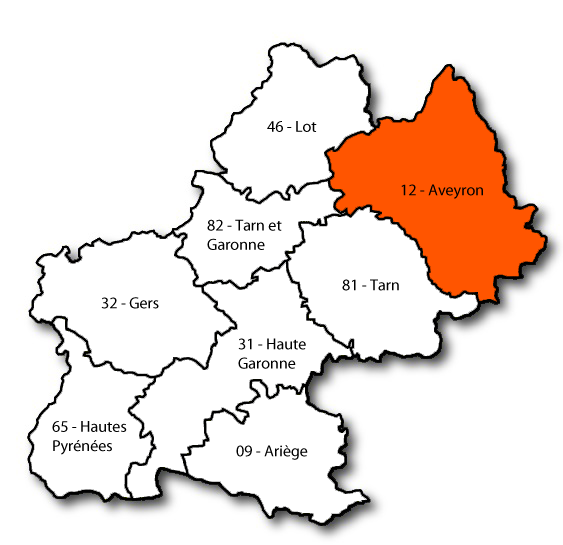
<style>
.page{position:relative;width:563px;height:545px;background:#ffffff}
.page>*{position:absolute;margin:0}
.t1{font:16px "MyriadPro-Regular";color:#000000}
</style>
<div class="page">
<p class="t1" style="left:267px;top:121px;width:50px;height:11px">46 - Lot</p>
<p class="t1" style="left:401px;top:184px;width:82px;height:15px">12 - Aveyron</p>
<p class="t1" style="left:207px;top:219px;width:75px;height:31px">82 - Tarn et<br>Garonne</p>
<p class="t1" style="left:342px;top:279px;width:57px;height:12px">81 - Tarn</p>
<p class="t1" style="left:101px;top:297px;width:58px;height:12px">32 - Gers</p>
<p class="t1" style="left:238px;top:338px;width:68px;height:31px">31 - Haute<br>Garonne</p>
<p class="t1" style="left:52px;top:421px;width:75px;height:34px">65 - Hautes<br>Pyrénées</p>
<p class="t1" style="left:236px;top:445px;width:72px;height:15px">09 - Ariège</p>
</div>
